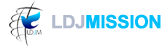
<style>
.page{position:relative;width:165px;height:46px;background:#ffffff}
.page>*{position:absolute;margin:0}
.t1{font:18px "Arial-BoldMT";letter-spacing:-0.025em;color:#00befa;font-weight:bold}
.t2{font:18px "Arial-BoldMT";letter-spacing:-0.025em;color:#b1bacc;font-weight:bold}
</style>
<div class="page">
<p class="t1" style="left:52px;top:14px;width:109px;height:15px"><span class="t2">LDJ</span>MISSION</p>
</div>
